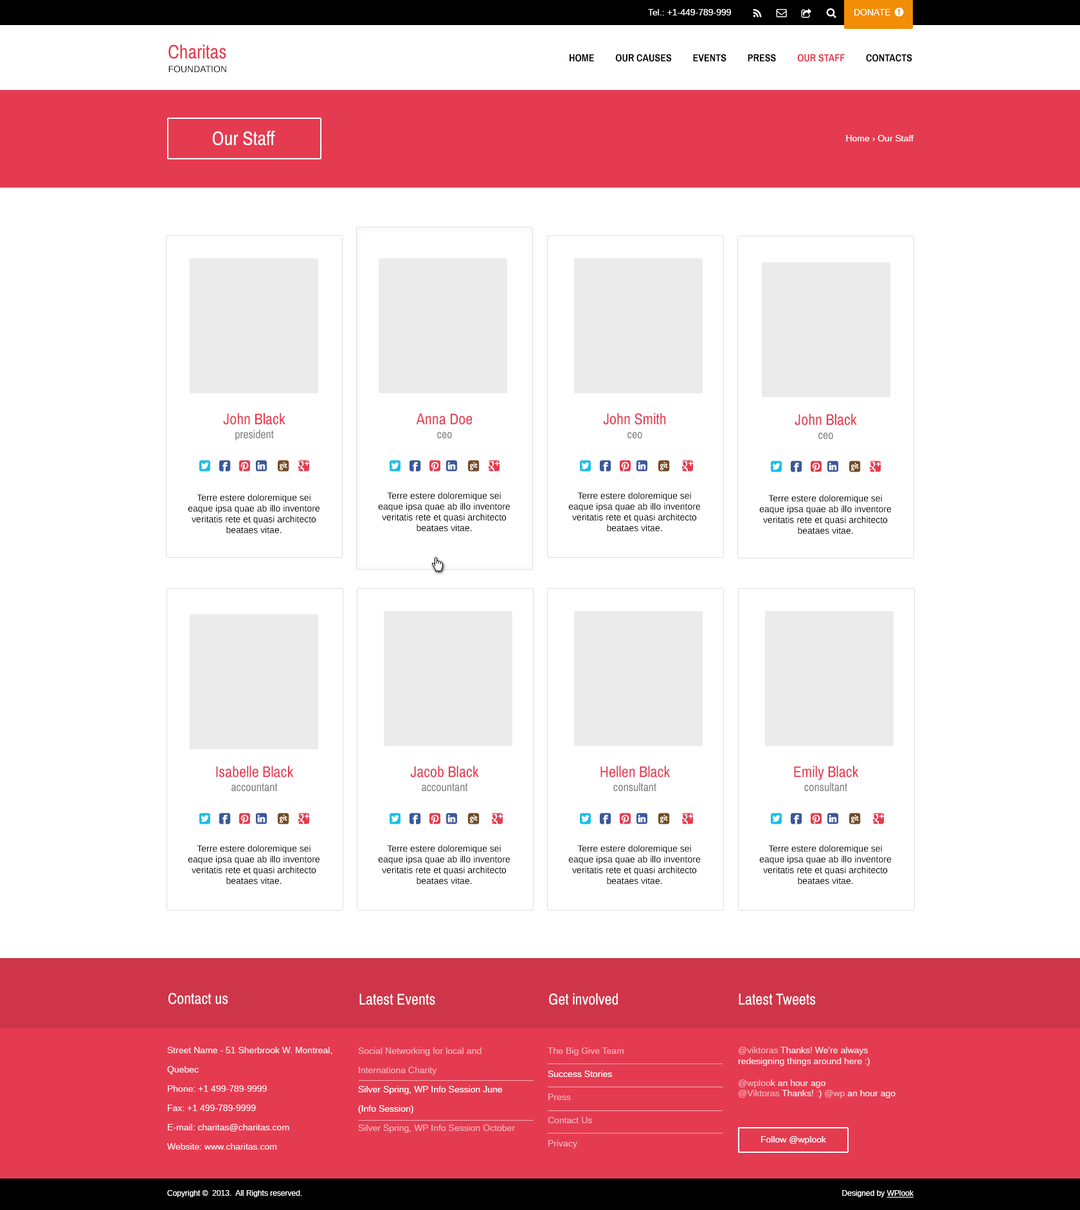
<style>
.page{position:relative;width:1080px;height:1210px;background:#ffffff}
.page>*{position:absolute;margin:0}
.t1{font:9px "Arimo";color:#ffffff}
.t2{font:19.3px "ArchivoNarrow-Regular";color:#e53b51}
.t3{font:9px "Arimo";color:#000000}
.t4{font:10.3px "ArchivoNarrow-Bold";color:#000000;text-transform:uppercase}
.t5{font:10.3px "ArchivoNarrow-Bold";color:#e53b51;text-transform:uppercase}
.t6{font:19.3px "ArchivoNarrow-Regular";color:#ffffff}
.t7{font:15.4px "ArchivoNarrow-Regular";color:#e53b51}
.t8{font:11.6px "ArchivoNarrow-Regular";color:#7e7e7f}
.t9{font:9px "Arimo";color:#010101}
.t10{font:15.4px "ArchivoNarrow-Regular";color:#ffffff}
.t11{font:9px/19.3px "Arimo";color:#fceced}
.t12{font:9px/19.3px "Arimo";color:#f4aeb7}
.t13{font:9px/19.3px "Arimo";color:#ffffff}
.t14{font:9px/23.1px "Arimo";color:#f4aeb7}
.t15{font:9px/23.1px "Arimo";color:#ffffff}
.t16{font:9px "Arimo";color:#fae6e9}
.t17{font:9px "Arimo";color:#f4aeb7}
.t18{font:7.7px "Arimo";color:#f9f9f9}
.t19{font:7.7px "Arimo";color:#f9f9f9;text-decoration:underline}
</style>
<div class="page">
<p class="t1" style="left:648px;top:9px;width:83px;height:6px">Tel.: +1-449-789-999</p>
<p class="t1" style="left:854px;top:9px;width:36px;height:6px">DONATE</p>
<p class="t2" style="left:168px;top:44px;width:58px;height:15px">Charitas</p>
<p class="t3" style="left:168px;top:66px;width:58px;height:7px">FOUNDATION</p>
<p class="t4" style="left:570px;top:54px;width:342px;height:8px">Home         Our Causes         Events         PRESS         <span class="t5">Our Staff</span>         Contacts</p>
<p class="t6" style="left:213px;top:130px;width:62px;height:15px">Our Staff</p>
<p class="t1" style="left:846px;top:135px;width:68px;height:6px">Home › Our Staff</p>
<p class="t7" style="left:223px;top:413px;width:62px;height:28px;text-align:center">John Black<br><span class="t8">president</span></p>
<p class="t7" style="left:416px;top:413px;width:57px;height:26px;text-align:center">Anna Doe<br><span class="t8">ceo</span></p>
<p class="t7" style="left:603px;top:413px;width:63px;height:26px;text-align:center">John Smith<br><span class="t8">ceo</span></p>
<p class="t7" style="left:795px;top:413px;width:62px;height:27px;text-align:center">John Black<br><span class="t8">ceo</span></p>
<p class="t9" style="left:188px;top:494px;width:132px;height:40px;text-align:center">Terre estere doloremique sei eaque ipsa quae ab illo inventore veritatis rete et quasi architecto beataes vitae.</p>
<p class="t3" style="left:378px;top:492px;width:132px;height:40px;text-align:center">Terre estere doloremique sei eaque ipsa quae ab illo inventore veritatis rete et quasi architecto beataes vitae.</p>
<p class="t9" style="left:568px;top:492px;width:133px;height:40px;text-align:center">Terre estere doloremique sei eaque ipsa quae ab illo inventore veritatis rete et quasi architecto beataes vitae.</p>
<p class="t9" style="left:759px;top:495px;width:133px;height:39px;text-align:center">Terre estere doloremique sei eaque ipsa quae ab illo inventore veritatis rete et quasi architecto beataes vitae.</p>
<p class="t7" style="left:216px;top:766px;width:78px;height:26px;text-align:center">Isabelle Black<br><span class="t8">accountant</span></p>
<p class="t7" style="left:410px;top:766px;width:69px;height:26px;text-align:center">Jacob Black<br><span class="t8">accountant</span></p>
<p class="t7" style="left:600px;top:766px;width:70px;height:26px;text-align:center">Hellen Black<br><span class="t8">consultant</span></p>
<p class="t7" style="left:794px;top:766px;width:65px;height:26px;text-align:center">Emily Black<br><span class="t8">consultant</span></p>
<p class="t3" style="left:188px;top:845px;width:132px;height:40px;text-align:center">Terre estere doloremique sei eaque ipsa quae ab illo inventore veritatis rete et quasi architecto beataes vitae.</p>
<p class="t9" style="left:378px;top:845px;width:132px;height:40px;text-align:center">Terre estere doloremique sei eaque ipsa quae ab illo inventore veritatis rete et quasi architecto beataes vitae.</p>
<p class="t9" style="left:568px;top:845px;width:133px;height:40px;text-align:center">Terre estere doloremique sei eaque ipsa quae ab illo inventore veritatis rete et quasi architecto beataes vitae.</p>
<p class="t9" style="left:759px;top:845px;width:133px;height:40px;text-align:center">Terre estere doloremique sei eaque ipsa quae ab illo inventore veritatis rete et quasi architecto beataes vitae.</p>
<p class="t10" style="left:168px;top:993px;width:60px;height:12px">Contact us</p>
<p class="t10" style="left:359px;top:994px;width:76px;height:11px">Latest Events</p>
<p class="t10" style="left:549px;top:993px;width:69px;height:12px">Get involved</p>
<p class="t10" style="left:739px;top:994px;width:77px;height:11px">Latest Tweets</p>
<p class="t11" style="left:167px;top:1047px;width:165px;height:103px">Street Name - 51 Sherbrook W. Montreal, Quebec<br>Phone: +1 499-789-9999<br>Fax: +1 499-789-9999<br>E-mail: charitas@charitas.com<br>Website: www.charitas.com</p>
<p class="t12" style="left:358px;top:1048px;width:157px;height:85px">Social Networking for local and  Internationa Charity<br><span class="t13">Silver Spring, WP Info Session June (Info Session)<br></span>Silver Spring, WP Info Session October</p>
<p class="t14" style="left:548px;top:1048px;width:76px;height:101px">The Big Give Team<br><span class="t15">Success Stories<br></span>Press<br>Contact Us<br>Privacy<br>Legal</p>
<p class="t16" style="left:738px;top:1047px;width:158px;height:52px"><span class="t17">@viktoras</span> Thanks! We're always redesigning things around here :) <br><br><span class="t17">@wploo</span>k an hour ago<br><span class="t17">@Viktoras </span>Thanks! :) <span class="t17">@wp</span> an hour ago</p>
<p class="t1" style="left:761px;top:1137px;width:65px;height:8px">Follow @wplook</p>
<p class="t18" style="left:167px;top:1191px;width:135px;height:7px">Copyright ©  2013.  All Rights reserved.</p>
<p class="t18" style="left:842px;top:1191px;width:72px;height:7px">Designed by <span class="t19">WPlook</span></p>
</div>
